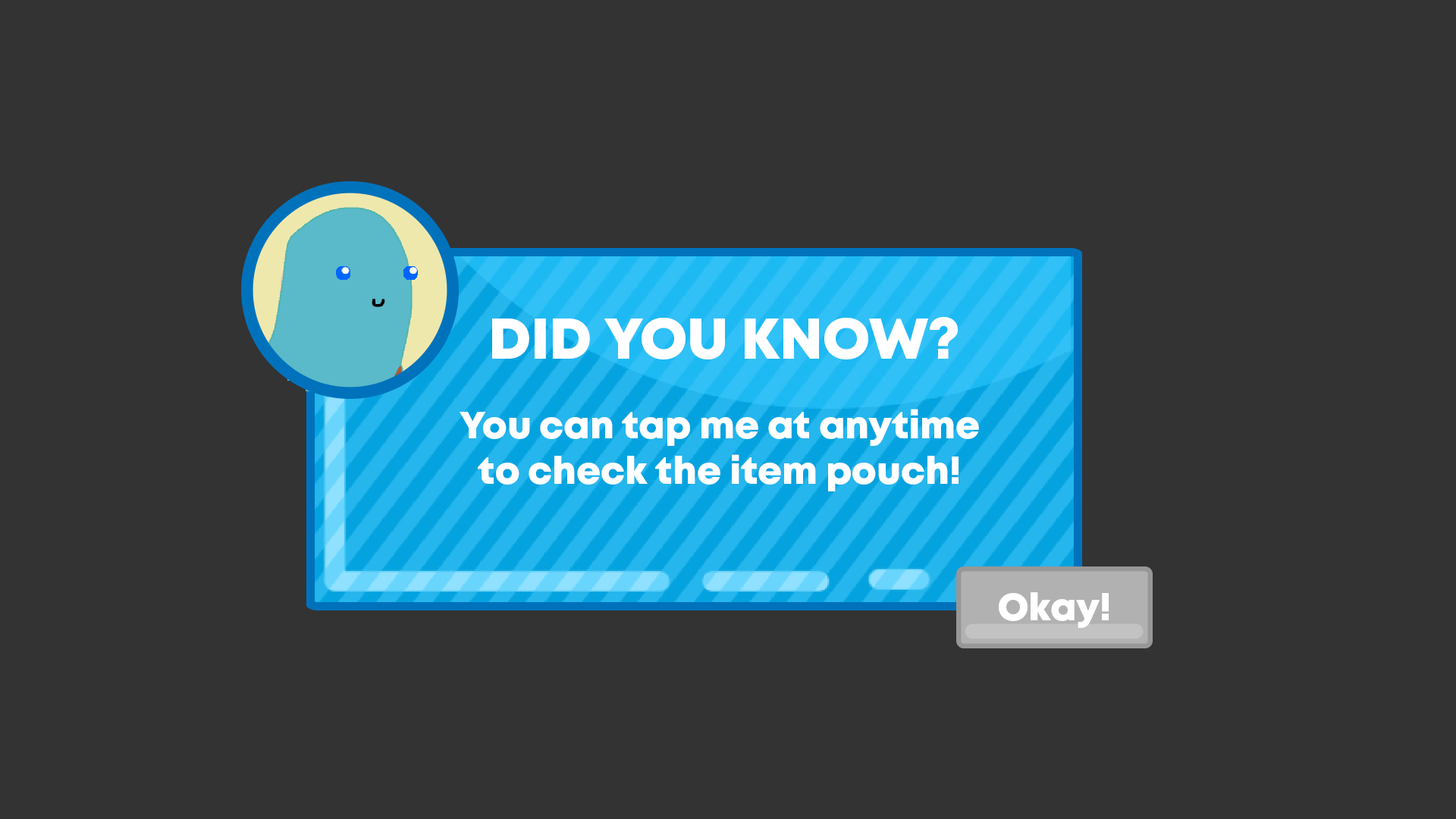
<style>
.page{position:relative;width:1456px;height:819px;background:#333333}
.page>*{position:absolute;margin:0}
.t1{font:56.9px "Mont-HeavyDEMO";color:#ffffff}
.t2{font:37.9px "Mont-HeavyDEMO";color:#ffffff}
</style>
<div class="page">
<p class="t1" style="left:492px;top:317px;width:466px;height:42px">DID YOU KNOW?</p>
<p class="t2" style="left:460px;top:409px;width:519px;height:82px;text-align:center">You can tap me at anytime<br>to check the item pouch!</p>
</div>
